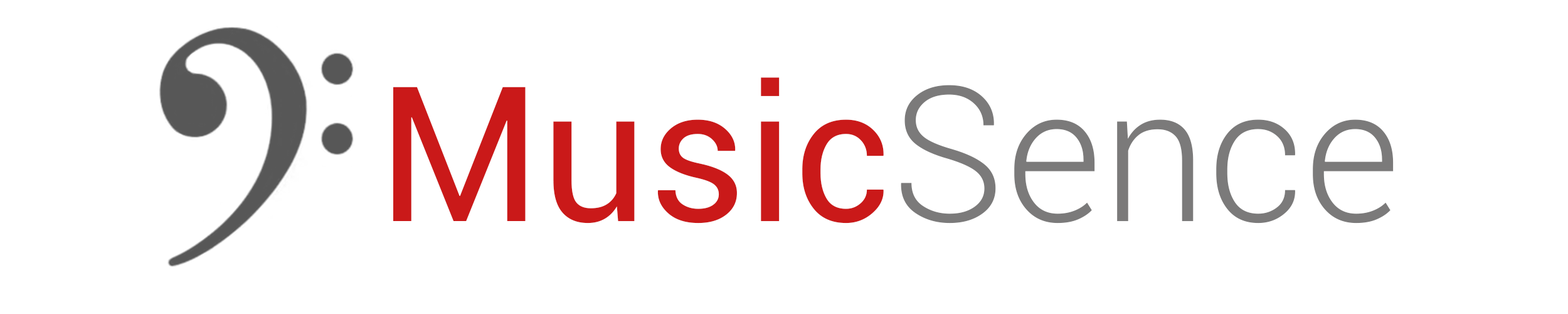
<style>
.page{position:relative;width:1568px;height:314px;background:#ffffff}
.page>*{position:absolute;margin:0}
.t1{font:188.2px "Roboto-Regular";color:#ca1919}
.t2{font:188.2px "Roboto-Light";color:#7b7a7a}
</style>
<div class="page">
<p class="t1" style="left:393px;top:77px;width:1001px;height:146px">Music<span class="t2">Sence</span></p>
</div>
